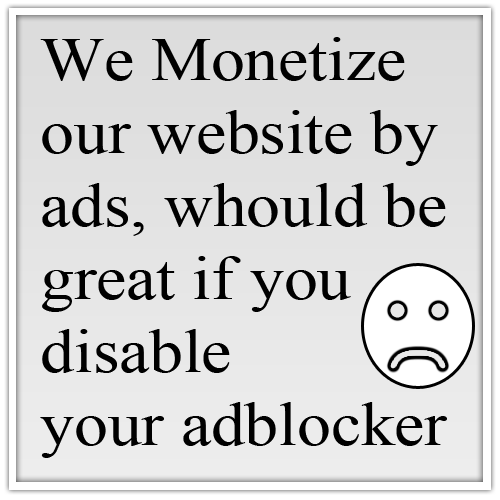
<style>
.page{position:relative;width:500px;height:500px}
.page>*{position:absolute;margin:0}
.t1{font:60.8px "TimesNewRomanPSMT";color:#000000;scale:1.11 1}
</style>
<div class="page">
<p class="t1" style="left:40px;top:37px;width:407px;height:421px">We Monetize<br>our website by<br>ads, whould be<br>great if you<br>disable<br>your adblocker</p>
</div>
